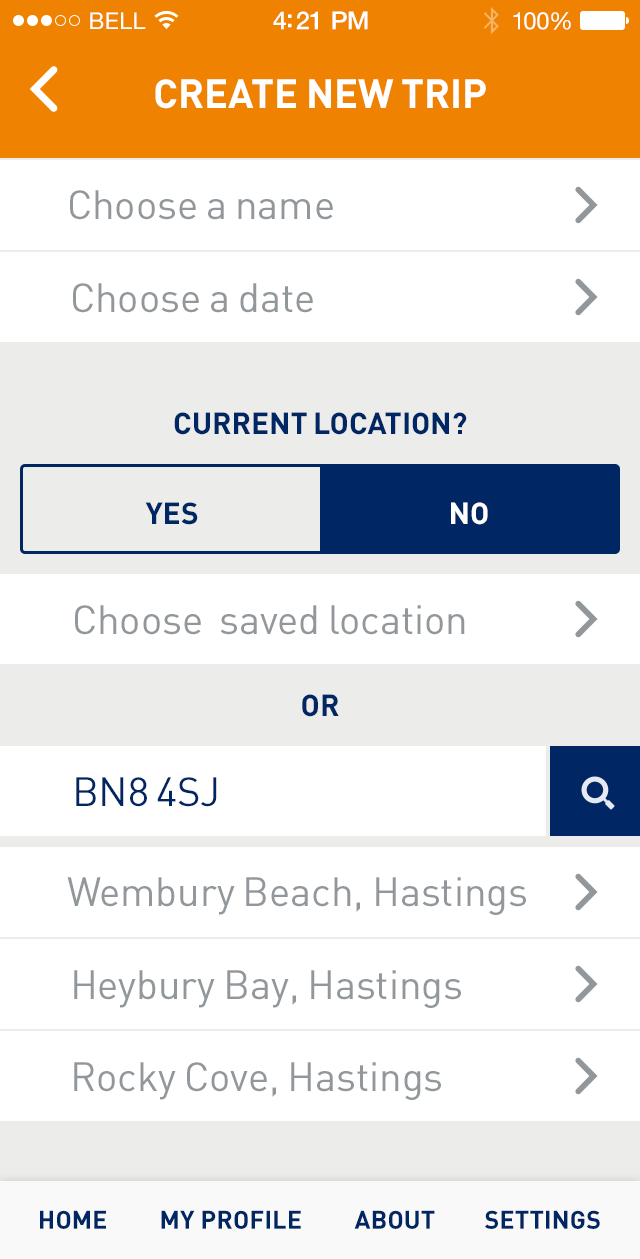
<style>
.page{position:relative;width:640px;height:1259px;background:#ffffff}
.page>*{position:absolute;margin:0}
.t1{font:23px "HelveticaNeue";letter-spacing:0.02em;color:#ffffff}
.t2{font:25px "HelveticaNeue-Medium";letter-spacing:-0.02em;color:#ffffff}
.t3{font:24px "HelveticaNeue";letter-spacing:-0.02em;color:#ffffff}
.t4{font:40px "DIN-Bold";color:#ffffff;text-transform:uppercase}
.t5{font:40px "DIN-Regular";color:#91979a}
.t6{font:30px "DIN-Bold";color:#002663;text-transform:uppercase}
.t7{font:30px "DIN-Bold";color:#002663}
.t8{font:30px "DIN-Bold";color:#ffffff}
.t9{font:40px "DIN-Regular";color:#002663}
.t10{font:25px "DIN-Bold";letter-spacing:0.01em;color:#002663;text-transform:uppercase}
</style>
<div class="page">
<p class="t1" style="left:90px;top:12px;width:56px;height:17px">BELL</p>
<p class="t2" style="left:273px;top:11px;width:95px;height:19px">4:21 PM</p>
<p class="t3" style="left:513px;top:12px;width:58px;height:18px">100%</p>
<p class="t4" style="left:155px;top:79px;width:331px;height:30px">Create new trip</p>
<p class="t5" style="left:70px;top:190px;width:263px;height:30px">Choose a name</p>
<p class="t5" style="left:73px;top:283px;width:240px;height:30px">Choose a date</p>
<p class="t6" style="left:174px;top:412px;width:293px;height:23px">Current location?</p>
<p class="t7" style="left:145px;top:502px;width:53px;height:23px">YES</p>
<p class="t8" style="left:451px;top:502px;width:37px;height:23px">NO</p>
<p class="t5" style="left:75px;top:605px;width:390px;height:30px">Choose  saved location</p>
<p class="t6" style="left:302px;top:694px;width:37px;height:23px">OR</p>
<p class="t9" style="left:76px;top:777px;width:141px;height:30px">BN8 4SJ</p>
<p class="t5" style="left:67px;top:877px;width:459px;height:38px">Wembury Beach, Hastings</p>
<p class="t5" style="left:74px;top:970px;width:387px;height:38px">Heybury Bay, Hastings</p>
<p class="t5" style="left:74px;top:1062px;width:367px;height:38px">Rocky Cove, Hastings</p>
<p class="t10" style="left:40px;top:1210px;width:66px;height:19px">Home</p>
<p class="t10" style="left:161px;top:1210px;width:140px;height:19px">My Profile</p>
<p class="t10" style="left:354px;top:1210px;width:81px;height:19px">About</p>
<p class="t10" style="left:485px;top:1210px;width:115px;height:19px">Settings</p>
</div>
